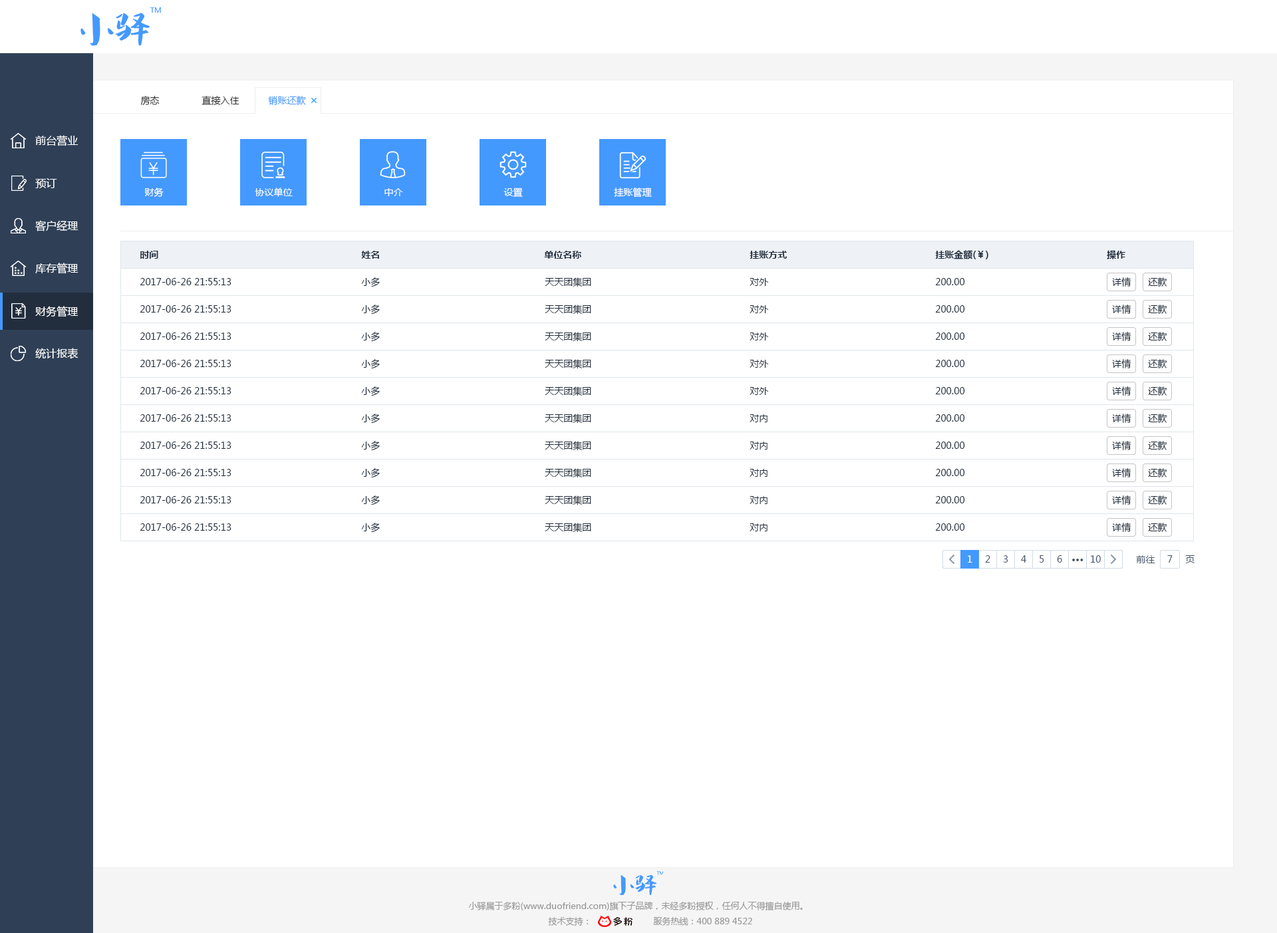
<style>
.page{position:relative;width:1277px;height:933px;background:#ffffff}
.page>*{position:absolute;margin:0}
.t1{font:9.3px "MicrosoftYaHei";color:#333333}
.t2{font:9.3px "MicrosoftYaHei";color:#4499ff}
.t3{font:10.6px "MicrosoftYaHei";color:#ffffff}
.t4{font:9.3px "MicrosoftYaHei";color:#ffffff}
.t5{font:9.3px "MicrosoftYaHei-Bold";color:#1f2d3d}
.t6{font:9.3px "MicrosoftYaHei";color:#1f2d3d}
.t7{font:9.3px "MicrosoftYaHei";color:#48576a}
.t8{font:9.3px "MicrosoftYaHei-Bold";color:#48576a}
.t9{font:8.6px "MicrosoftYaHei";color:#999999}
</style>
<div class="page">
<p class="t1" style="left:140px;top:96px;width:20px;height:9px">房态</p>
<p class="t1" style="left:202px;top:96px;width:38px;height:9px">直接入住</p>
<p class="t2" style="left:268px;top:96px;width:38px;height:9px">销账还款</p>
<p class="t3" style="left:35px;top:135px;width:44px;height:11px">前台营业</p>
<p class="t3" style="left:35px;top:178px;width:22px;height:10px">预订</p>
<p class="t4" style="left:144px;top:188px;width:20px;height:9px">财务</p>
<p class="t4" style="left:255px;top:188px;width:38px;height:9px">协议单位</p>
<p class="t4" style="left:385px;top:188px;width:18px;height:8px">中介</p>
<p class="t4" style="left:504px;top:188px;width:19px;height:9px">设置</p>
<p class="t4" style="left:614px;top:188px;width:38px;height:10px">挂账管理</p>
<p class="t3" style="left:35px;top:220px;width:44px;height:12px">客户经理</p>
<p class="t5" style="left:140px;top:251px;width:18px;height:8px">时间</p>
<p class="t5" style="left:361px;top:251px;width:18px;height:8px">姓名</p>
<p class="t5" style="left:544px;top:251px;width:37px;height:8px">单位名称</p>
<p class="t5" style="left:750px;top:251px;width:37px;height:8px">挂账方式</p>
<p class="t5" style="left:935px;top:250px;width:54px;height:9px">挂账金额(￥)</p>
<p class="t5" style="left:1107px;top:250px;width:19px;height:9px">操作</p>
<p class="t3" style="left:35px;top:263px;width:44px;height:11px">库存管理</p>
<p class="t6" style="left:140px;top:278px;width:92px;height:7px">2017-06-26 21:55:13</p>
<p class="t6" style="left:361px;top:277px;width:19px;height:10px">小多</p>
<p class="t6" style="left:545px;top:277px;width:46px;height:10px">天天团集团</p>
<p class="t6" style="left:750px;top:278px;width:19px;height:8px">对外</p>
<p class="t6" style="left:935px;top:278px;width:30px;height:7px">200.00</p>
<p class="t6" style="left:1112px;top:277px;width:20px;height:10px">详情</p>
<p class="t6" style="left:1148px;top:277px;width:20px;height:10px">还款</p>
<p class="t6" style="left:140px;top:305px;width:92px;height:8px">2017-06-26 21:55:13</p>
<p class="t6" style="left:361px;top:305px;width:19px;height:10px">小多</p>
<p class="t6" style="left:545px;top:305px;width:46px;height:10px">天天团集团</p>
<p class="t6" style="left:750px;top:305px;width:19px;height:8px">对外</p>
<p class="t6" style="left:935px;top:305px;width:30px;height:8px">200.00</p>
<p class="t6" style="left:1112px;top:305px;width:20px;height:9px">详情</p>
<p class="t6" style="left:1148px;top:305px;width:20px;height:9px">还款</p>
<p class="t3" style="left:35px;top:306px;width:44px;height:11px">财务管理</p>
<p class="t6" style="left:140px;top:333px;width:92px;height:7px">2017-06-26 21:55:13</p>
<p class="t6" style="left:361px;top:332px;width:19px;height:10px">小多</p>
<p class="t6" style="left:545px;top:332px;width:46px;height:10px">天天团集团</p>
<p class="t6" style="left:750px;top:333px;width:19px;height:8px">对外</p>
<p class="t6" style="left:935px;top:333px;width:30px;height:7px">200.00</p>
<p class="t6" style="left:1112px;top:332px;width:20px;height:9px">详情</p>
<p class="t6" style="left:1148px;top:332px;width:20px;height:9px">还款</p>
<p class="t3" style="left:35px;top:348px;width:44px;height:11px">统计报表</p>
<p class="t6" style="left:140px;top:360px;width:92px;height:7px">2017-06-26 21:55:13</p>
<p class="t6" style="left:361px;top:359px;width:19px;height:10px">小多</p>
<p class="t6" style="left:545px;top:359px;width:46px;height:10px">天天团集团</p>
<p class="t6" style="left:750px;top:360px;width:19px;height:8px">对外</p>
<p class="t6" style="left:935px;top:360px;width:30px;height:7px">200.00</p>
<p class="t6" style="left:1112px;top:359px;width:20px;height:10px">详情</p>
<p class="t6" style="left:1148px;top:359px;width:20px;height:10px">还款</p>
<p class="t6" style="left:140px;top:387px;width:92px;height:8px">2017-06-26 21:55:13</p>
<p class="t6" style="left:361px;top:387px;width:19px;height:10px">小多</p>
<p class="t6" style="left:545px;top:387px;width:46px;height:10px">天天团集团</p>
<p class="t6" style="left:750px;top:387px;width:19px;height:8px">对外</p>
<p class="t6" style="left:935px;top:387px;width:30px;height:8px">200.00</p>
<p class="t6" style="left:1112px;top:387px;width:20px;height:9px">详情</p>
<p class="t6" style="left:1148px;top:387px;width:20px;height:9px">还款</p>
<p class="t6" style="left:361px;top:414px;width:19px;height:10px">小多</p>
<p class="t6" style="left:545px;top:414px;width:46px;height:10px">天天团集团</p>
<p class="t6" style="left:1112px;top:414px;width:20px;height:9px">详情</p>
<p class="t6" style="left:1148px;top:414px;width:20px;height:9px">还款</p>
<p class="t6" style="left:140px;top:415px;width:92px;height:7px">2017-06-26 21:55:13</p>
<p class="t6" style="left:750px;top:415px;width:18px;height:7px">对内</p>
<p class="t6" style="left:935px;top:415px;width:30px;height:7px">200.00</p>
<p class="t6" style="left:140px;top:442px;width:92px;height:7px">2017-06-26 21:55:13</p>
<p class="t6" style="left:361px;top:441px;width:19px;height:10px">小多</p>
<p class="t6" style="left:545px;top:441px;width:46px;height:10px">天天团集团</p>
<p class="t6" style="left:750px;top:442px;width:18px;height:8px">对内</p>
<p class="t6" style="left:935px;top:442px;width:30px;height:7px">200.00</p>
<p class="t6" style="left:1112px;top:441px;width:20px;height:9px">详情</p>
<p class="t6" style="left:1148px;top:441px;width:20px;height:9px">还款</p>
<p class="t6" style="left:140px;top:469px;width:92px;height:7px">2017-06-26 21:55:13</p>
<p class="t6" style="left:361px;top:468px;width:19px;height:10px">小多</p>
<p class="t6" style="left:545px;top:468px;width:46px;height:10px">天天团集团</p>
<p class="t6" style="left:750px;top:469px;width:18px;height:8px">对内</p>
<p class="t6" style="left:935px;top:469px;width:30px;height:7px">200.00</p>
<p class="t6" style="left:1112px;top:468px;width:20px;height:10px">详情</p>
<p class="t6" style="left:1148px;top:468px;width:20px;height:10px">还款</p>
<p class="t6" style="left:140px;top:496px;width:92px;height:8px">2017-06-26 21:55:13</p>
<p class="t6" style="left:361px;top:496px;width:19px;height:10px">小多</p>
<p class="t6" style="left:545px;top:496px;width:46px;height:10px">天天团集团</p>
<p class="t6" style="left:750px;top:496px;width:18px;height:8px">对内</p>
<p class="t6" style="left:935px;top:496px;width:30px;height:8px">200.00</p>
<p class="t6" style="left:1112px;top:496px;width:20px;height:9px">详情</p>
<p class="t6" style="left:1148px;top:496px;width:20px;height:9px">还款</p>
<p class="t6" style="left:140px;top:524px;width:92px;height:7px">2017-06-26 21:55:13</p>
<p class="t6" style="left:361px;top:523px;width:19px;height:10px">小多</p>
<p class="t6" style="left:545px;top:523px;width:46px;height:10px">天天团集团</p>
<p class="t6" style="left:750px;top:524px;width:18px;height:8px">对内</p>
<p class="t6" style="left:935px;top:524px;width:30px;height:7px">200.00</p>
<p class="t6" style="left:1112px;top:523px;width:20px;height:9px">详情</p>
<p class="t6" style="left:1148px;top:523px;width:20px;height:9px">还款</p>
<p class="t4" style="left:968px;top:556px;width:5px;height:7px">1</p>
<p class="t7" style="left:985px;top:556px;width:6px;height:7px">2</p>
<p class="t7" style="left:1003px;top:556px;width:6px;height:7px">3</p>
<p class="t7" style="left:1021px;top:556px;width:6px;height:7px">4</p>
<p class="t7" style="left:1040px;top:556px;width:5px;height:7px">5</p>
<p class="t7" style="left:1057px;top:556px;width:6px;height:7px">6</p>
<p class="t7" style="left:1091px;top:556px;width:10px;height:7px">10</p>
<p class="t7" style="left:1136px;top:556px;width:20px;height:8px">前往</p>
<p class="t7" style="left:1168px;top:556px;width:5px;height:7px">7</p>
<p class="t7" style="left:1186px;top:556px;width:9px;height:8px">页</p>
<p class="t8" style="left:1073px;top:559px;width:11px;height:3px">···</p>
<p class="t9" style="left:468px;top:902px;width:335px;height:9px">小驿属于多粉(www.duofriend.com)旗下子品牌，未经多粉授权，任何人不得擅自使用。</p>
<p class="t9" style="left:548px;top:917px;width:40px;height:9px">技术支持：</p>
<p class="t9" style="left:653px;top:917px;width:99px;height:9px">服务热线：400 889 4522</p>
</div>
